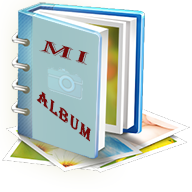
<style>
.page{position:relative;width:192px;height:192px;background:#ffffff}
.page>*{position:absolute;margin:0}
.t1{font:17.6px "Algerian";letter-spacing:0.06em;color:#750a0a;scale:2.54 1}
.t2{font:16.8px "Algerian";letter-spacing:0.06em;color:#750a0a;font-weight:bold;scale:1.1 1}
</style>
<div class="page">
<p class="t1" style="left:39px;top:40px;width:50px;height:25px;rotate:17deg">Mi</p>
<p class="t2" style="left:36px;top:91px;width:55px;height:51px;rotate:37deg">ALBUM</p>
</div>
